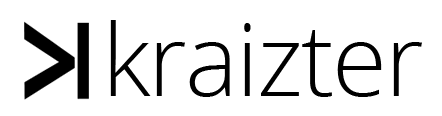
<style>
.page{position:relative;width:442px;height:116px;background:#ffffff}
.page>*{position:absolute;margin:0}
.t1{font:100px "OpenSans-Light";letter-spacing:-0.02em;color:#000000}
</style>
<div class="page">
<p class="t1" style="left:110px;top:20px;width:312px;height:77px">kraizter</p>
</div>
